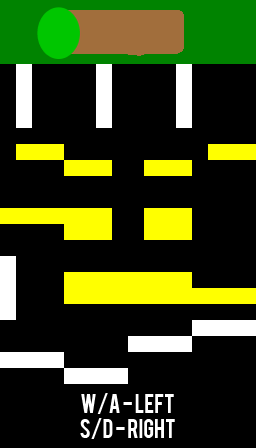
<style>
.page{position:relative;width:256px;height:448px;background:#000000}
.page>*{position:absolute;margin:0}
.t1{font:20.8px "Bebas";color:#ffffff}
</style>
<div class="page">
<p class="t1" style="left:80px;top:393px;width:95px;height:46px;text-align:center">W/A - Left<br>S/D - Right</p>
</div>
